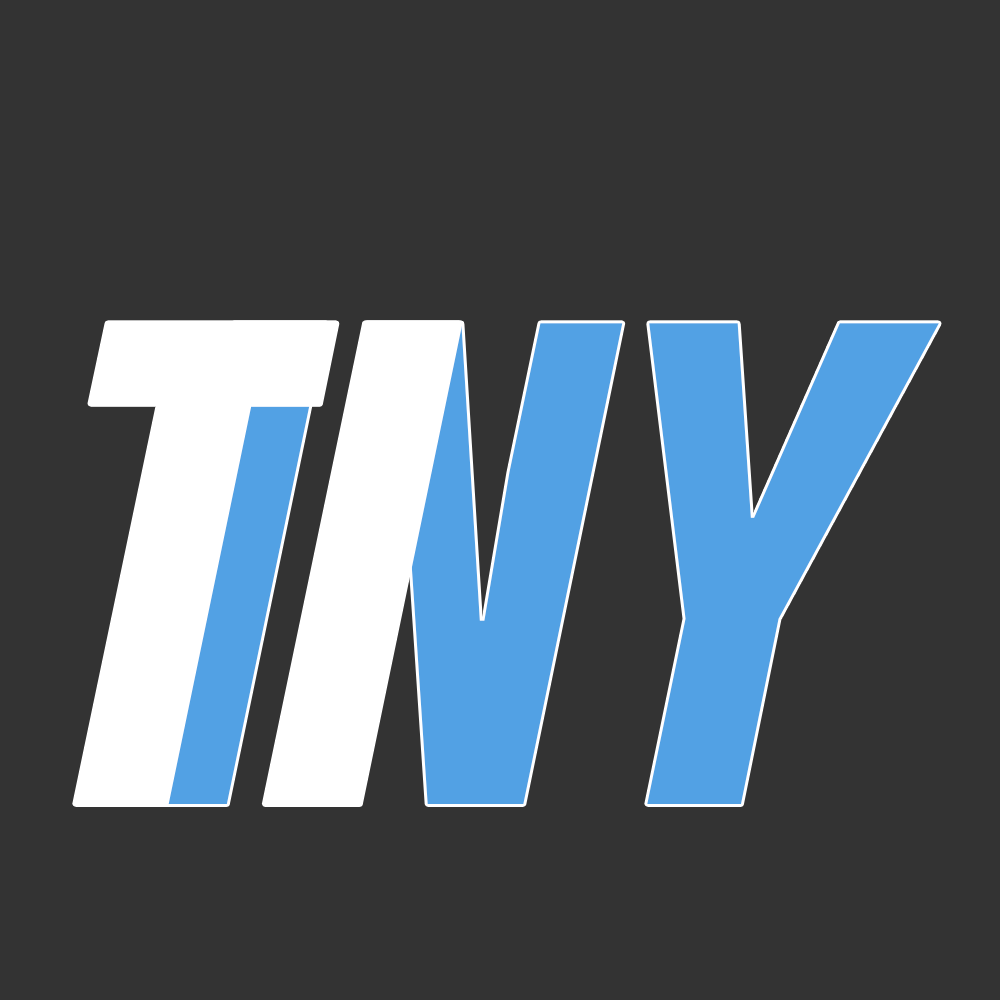
<style>
.page{position:relative;width:1000px;height:1000px;background:#333333}
.page>*{position:absolute;margin:0}
.t1{font:659.3px "MonaSans-BoldNarrowItalic";color:#ffffff}
.t2{font:659.3px "MonaSans-BoldNarrowItalic"}
</style>
<div class="page">
<p class="t1" style="left:75px;top:323px;width:385px;height:481px">TI</p>
<p class="t2" style="left:133px;top:323px;width:806px;height:481px">INY</p>
</div>
